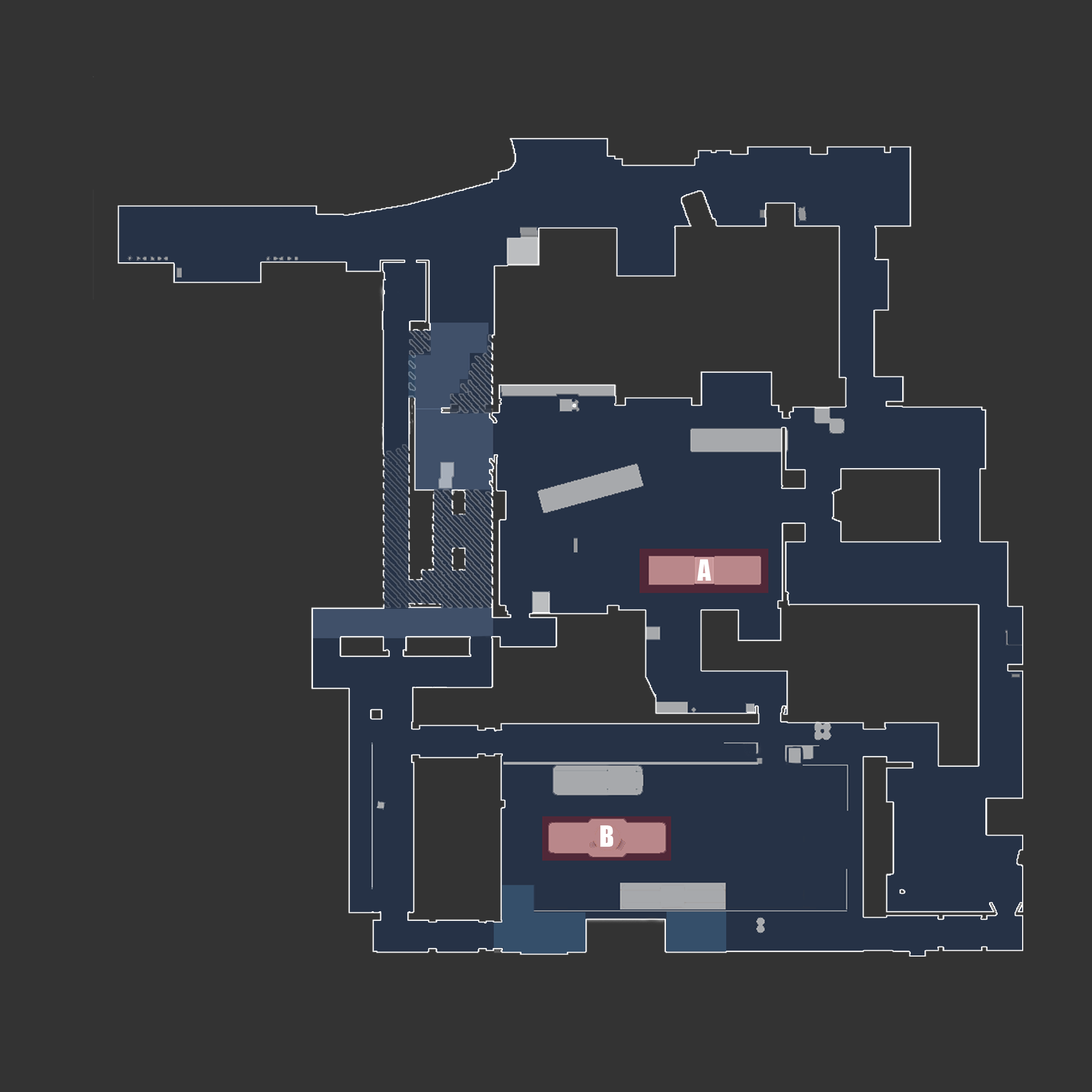
<style>
.page{position:relative;width:1092px;height:1092px;background:#333333}
.page>*{position:absolute;margin:0}
.t1{font:26.7px "Impact";color:#ffffff}
</style>
<div class="page">
<p class="t1" style="left:697px;top:559px;width:14px;height:22px">A</p>
<p class="t1" style="left:600px;top:825px;width:13px;height:22px">B</p>
</div>
